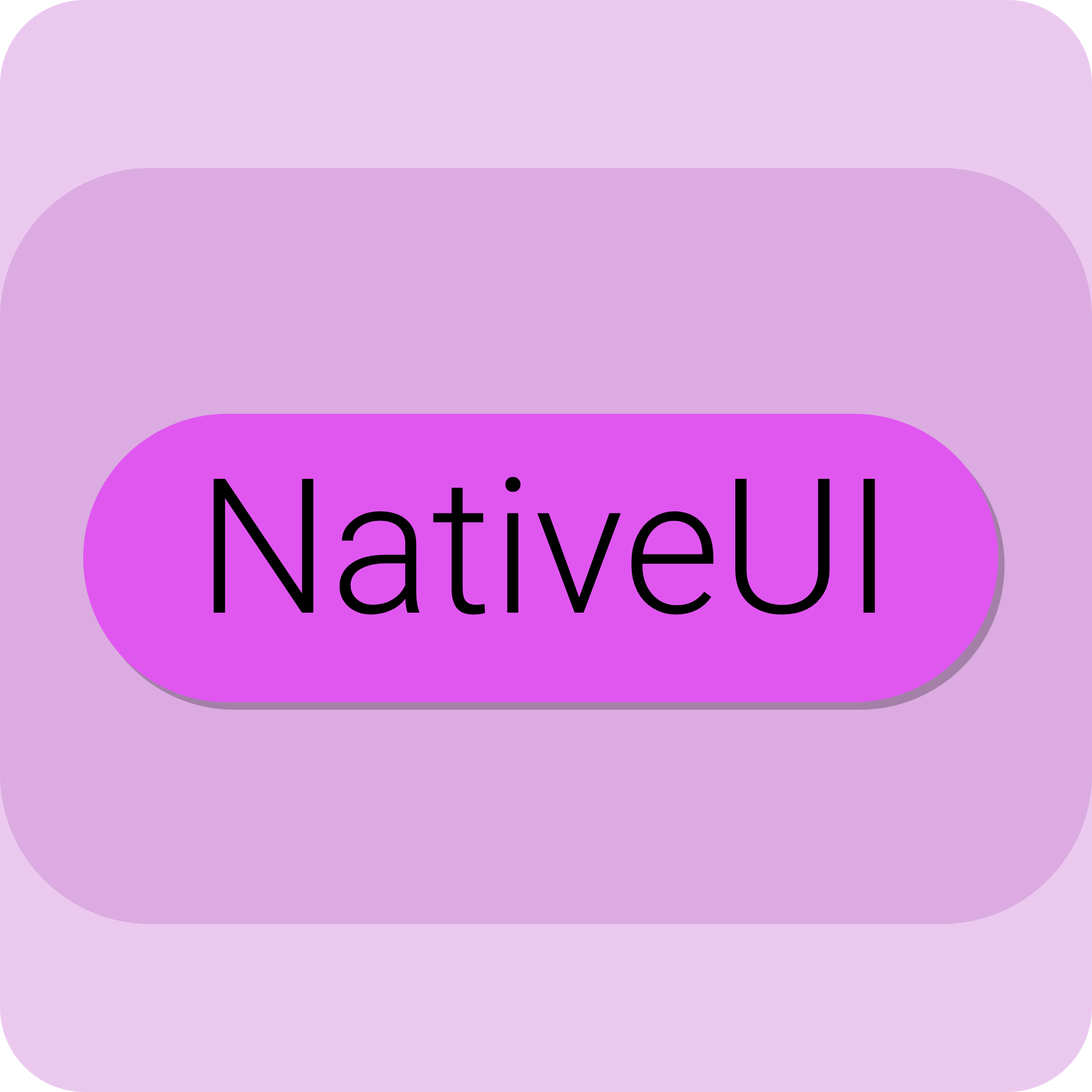
<style>
.page{position:relative;width:1092px;height:1092px;background:#dbabe1}
.page>*{position:absolute;margin:0}
.t1{font:188.2px "Roboto-Light";color:#000000}
</style>
<div class="page">
<p class="t1" style="left:213px;top:477px;width:662px;height:138px">NativeUI</p>
</div>
